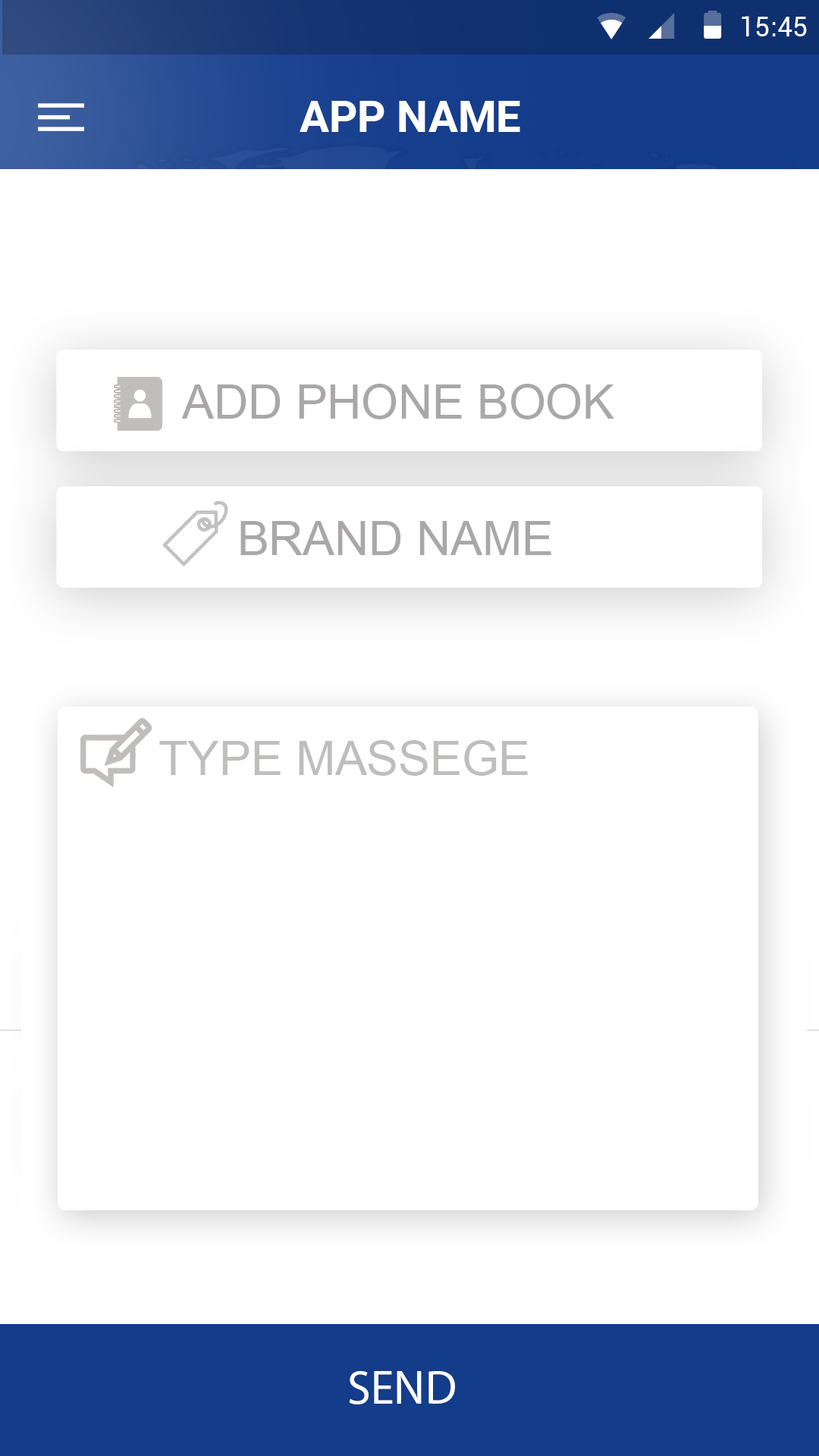
<style>
.page{position:relative;width:819px;height:1456px;background:#ffffff}
.page>*{position:absolute;margin:0}
.t1{font:47.4px "ArialMT";color:#a9a7a7;text-transform:uppercase}
.t2{font:47.4px "ArialMT";color:#c0bebd;text-transform:uppercase}
.t3{font:47.4px "MyriadPro-Regular";color:#fffefd;text-transform:uppercase}
</style>
<div class="page">
<p class="t1" style="left:181px;top:384px;width:433px;height:35px">add phone book</p>
<p class="t1" style="left:240px;top:521px;width:311px;height:34px">brand name</p>
<p class="t2" style="left:159px;top:740px;width:369px;height:36px">type massege</p>
<p class="t3" style="left:349px;top:1371px;width:106px;height:33px">send</p>
</div>
